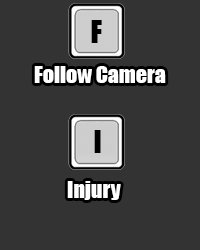
<style>
.page{position:relative;width:200px;height:250px;background:#333333}
.page>*{position:absolute;margin:0}
.t1{font:29.3px "Impact";color:#000000}
.t2{font:21.9px "Impact";color:#ffffff}
</style>
<div class="page">
<p class="t1" style="left:91px;top:20px;width:11px;height:23px">F</p>
<p class="t2" style="left:34px;top:66px;width:132px;height:17px">Follow Camera</p>
<p class="t1" style="left:94px;top:130px;width:7px;height:23px">I</p>
<p class="t2" style="left:67px;top:181px;width:54px;height:19px">Injury</p>
</div>
